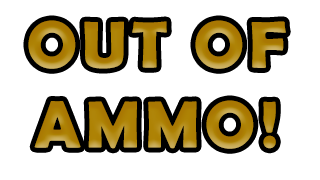
<style>
.page{position:relative;width:320px;height:180px;background:#ffffff}
.page>*{position:absolute;margin:0}
.t1{font:66.7px "BerlinSansFBDemi-Bold";letter-spacing:0.075em;color:#ae8205}
</style>
<div class="page">
<p class="t1" style="left:28px;top:20px;width:258px;height:129px;text-align:center">OUT OF<br>AMMO!</p>
</div>
